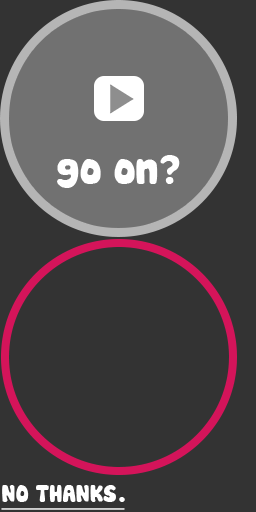
<style>
.page{position:relative;width:256px;height:512px;background:#333333}
.page>*{position:absolute;margin:0}
.t1{font:39.8px "Cookies";letter-spacing:-0.02em;color:#ffffff}
.t2{font:23.6px "Cookies";letter-spacing:-0.02em;color:#ffffff}
</style>
<div class="page">
<p class="t1" style="left:57px;top:155px;width:123px;height:33px">go on?</p>
<p class="t2" style="left:2px;top:485px;width:123px;height:17px">NO THANKS.</p>
</div>
